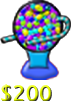
<style>
.page{position:relative;width:79px;height:101px;background:#ffffff}
.page>*{position:absolute;margin:0}
.t1{font:22px "LucidaConsole"}
</style>
<div class="page">
<p class="t1" style="left:1px;top:84px;width:50px;height:18px">$200</p>
</div>
